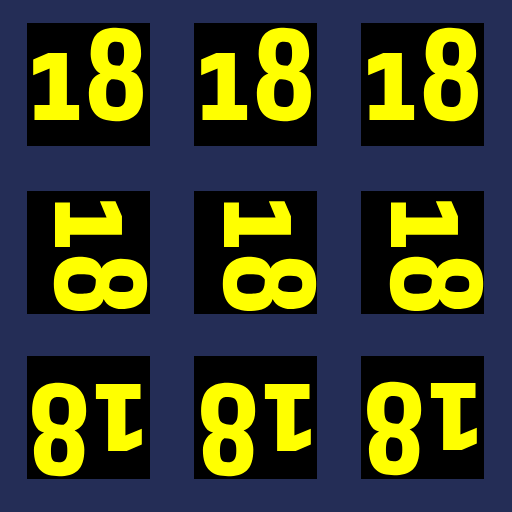
<style>
.page{position:relative;width:512px;height:512px;background:#242d56}
.page>*{position:absolute;margin:0}
.t1{font:130px "Share-BoldOSF";color:#ffff00}
</style>
<div class="page">
<p class="t1" style="left:33px;top:27px;width:110px;height:95px">18</p>
<p class="t1" style="left:201px;top:27px;width:110px;height:95px">18</p>
<p class="t1" style="left:368px;top:27px;width:110px;height:95px">18</p>
<p class="t1" style="left:53px;top:201px;width:95px;height:110px;rotate:90deg">18</p>
<p class="t1" style="left:222px;top:201px;width:95px;height:110px;rotate:90deg">18</p>
<p class="t1" style="left:389px;top:201px;width:95px;height:110px;rotate:90deg">18</p>
<p class="t1" style="left:32px;top:382px;width:110px;height:95px;rotate:-180deg">18</p>
<p class="t1" style="left:201px;top:382px;width:110px;height:95px;rotate:-180deg">18</p>
<p class="t1" style="left:367px;top:381px;width:110px;height:95px;rotate:-180deg">18</p>
</div>
